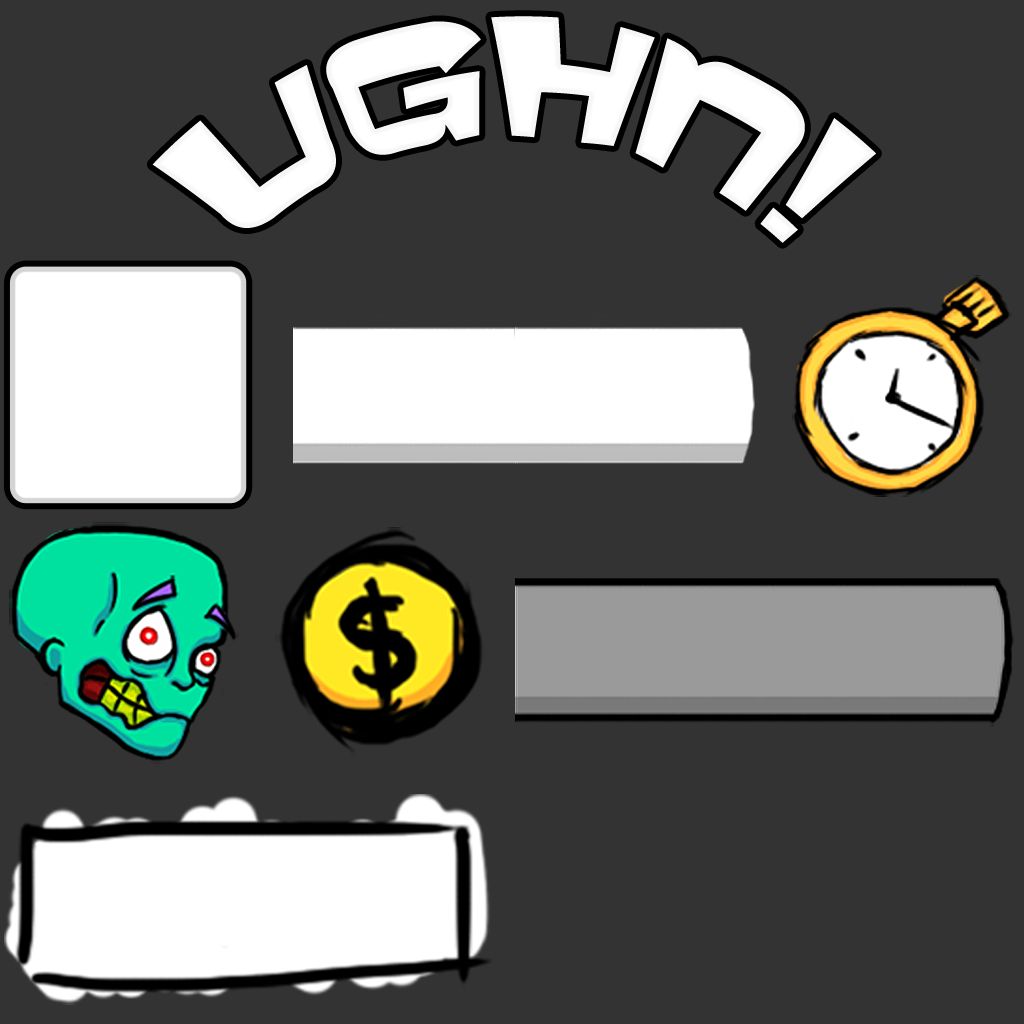
<style>
.page{position:relative;width:1024px;height:1024px;background:#333333}
.page>*{position:absolute;margin:0}
.t1{font:148.9px "Baveuse";color:#ffffff}
</style>
<div class="page">
<p class="t1" style="left:152px;top:16px;width:724px;height:227px">UGHN!</p>
</div>
